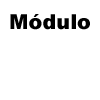
<style>
.page{position:relative;width:100px;height:100px;background:#ffffff}
.page>*{position:absolute;margin:0}
.t1{font:20.8px "Arial-Black";color:#000000}
</style>
<div class="page">
<p class="t1" style="left:10px;top:14px;width:80px;height:16px">Módulo</p>
</div>
